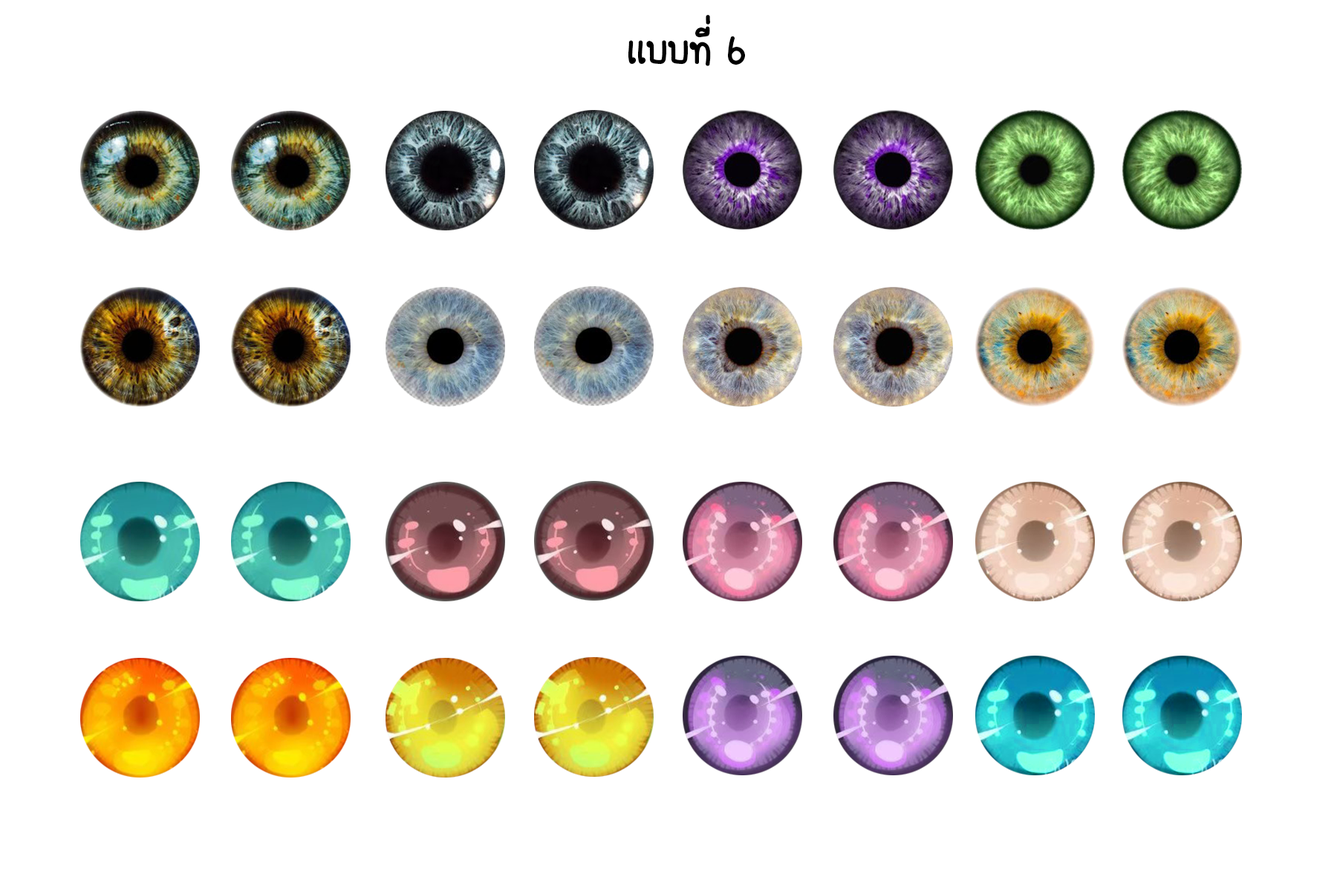
<style>
.page{position:relative;width:1337px;height:892px;background:#ffffff}
.page>*{position:absolute;margin:0}
.t1{font:55.7px "FCDaisyRegular";color:#000000}
</style>
<div class="page">
<p class="t1" style="left:628px;top:15px;width:117px;height:51px">เเบบที่ 6</p>
</div>
